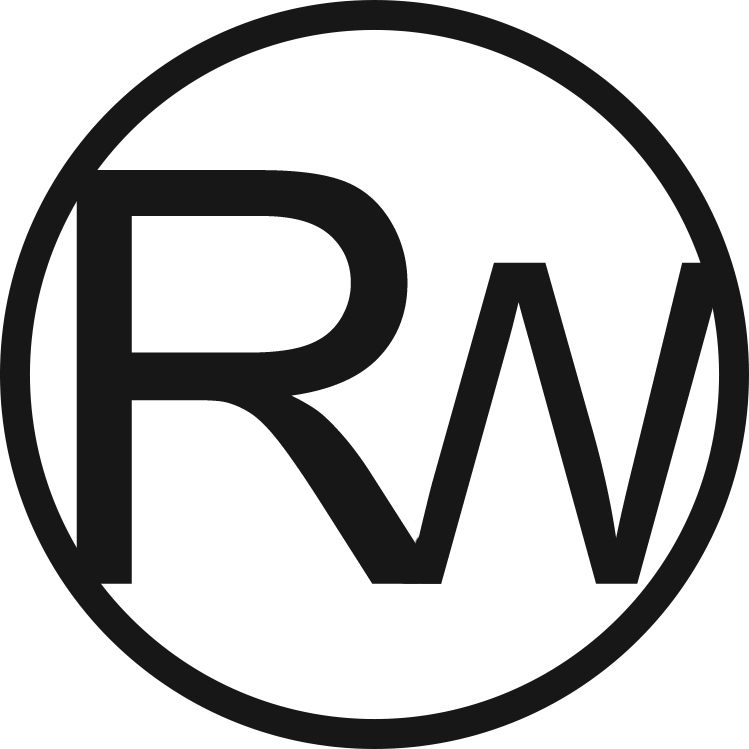
<style>
.page{position:relative;width:749px;height:749px;background:#ffffff}
.page>*{position:absolute;margin:0}
.t1{font:577.5px "ArialMT";color:#171717}
.t2{font:447.9px "ArialMT";color:#171717}
</style>
<div class="page">
<p class="t1" style="left:76px;top:170px;width:366px;height:414px">R</p>
<p class="t2" style="left:312px;top:262px;width:413px;height:322px">W</p>
</div>
